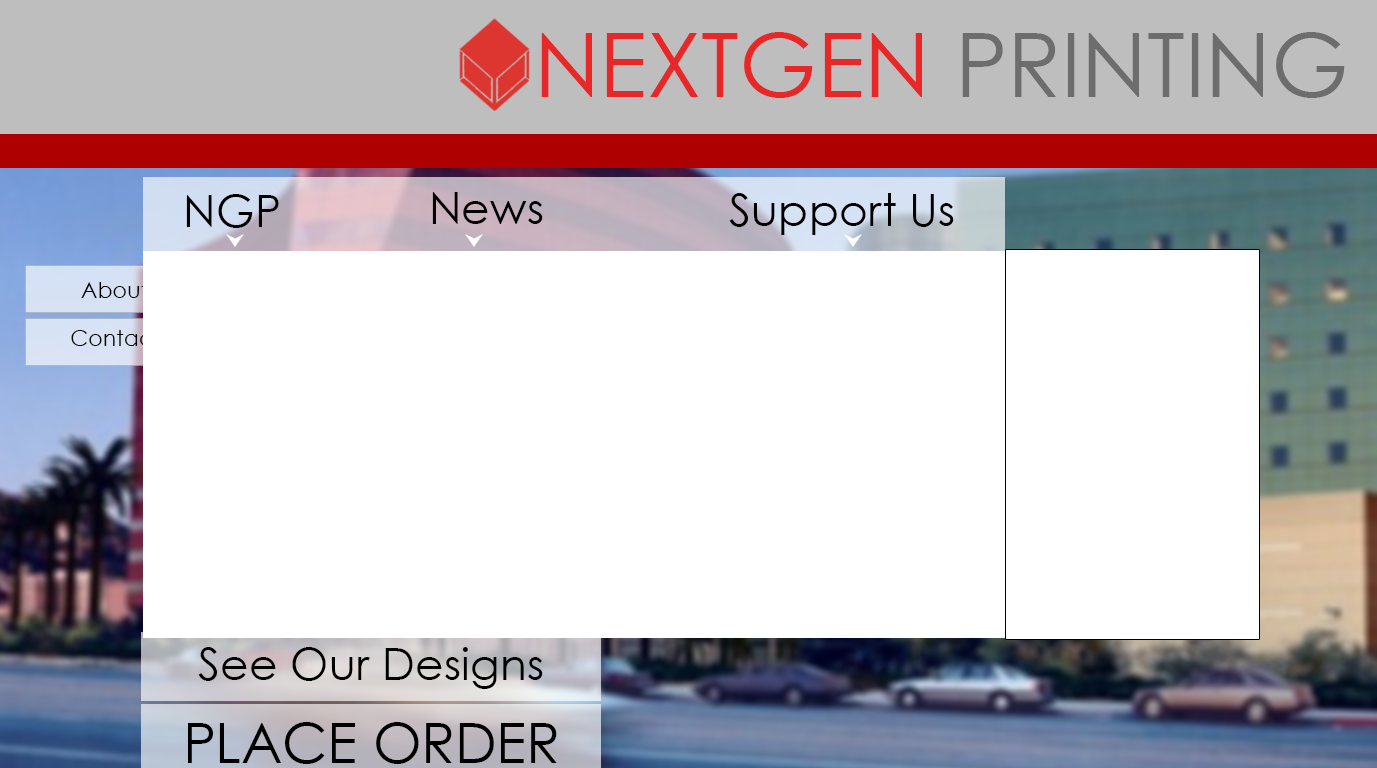
<style>
.page{position:relative;width:1377px;height:768px;background:#ffffff}
.page>*{position:absolute;margin:0}
.t1{font:88.9px "CenturyGothic";color:#6d6d6d}
.t2{font:88.9px "CenturyGothic";color:#e72828}
.t3{font:44.4px "CenturyGothic";color:#000000}
.t4{font:22.2px "CenturyGothic";color:#000000}
.t5{font:22.2px "CenturyGothic"}
.t6{font:55.6px "CenturyGothic";color:#000000}
</style>
<div class="page">
<p class="t1" style="left:541px;top:32px;width:804px;height:66px"><span class="t2">NEXTGEN </span>PRINTING</p>
<p class="t3" style="left:186px;top:194px;width:93px;height:34px">NGP</p>
<p class="t3" style="left:432px;top:192px;width:111px;height:32px">News</p>
<p class="t3" style="left:729px;top:193px;width:225px;height:42px">Support Us</p>
<p class="t4" style="left:81px;top:282px;width:96px;height:16px">About Us</p>
<p class="t5" style="left:71px;top:330px;width:119px;height:16px">Contact Us</p>
<p class="t3" style="left:198px;top:647px;width:345px;height:42px">See Our Designs</p>
<p class="t6" style="left:188px;top:722px;width:369px;height:42px"><span class="t4"><br></span>PLACE ORDER</p>
</div>
